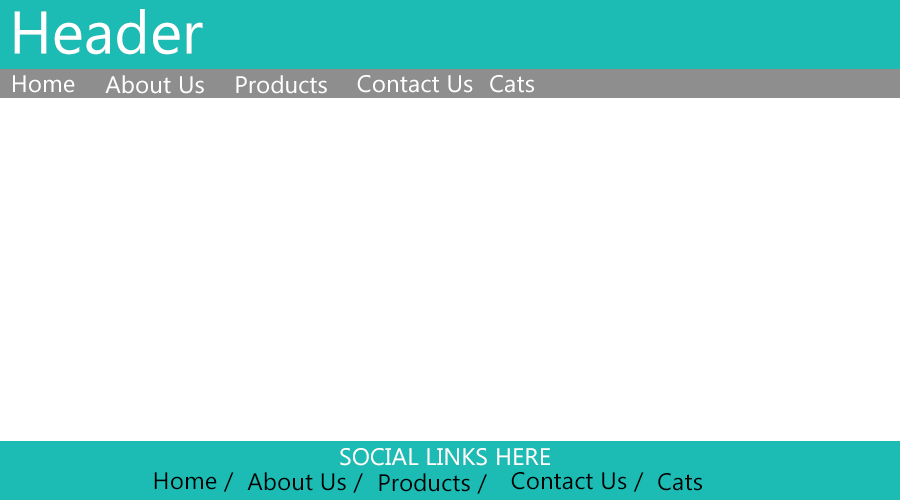
<style>
.page{position:relative;width:900px;height:500px;background:#ffffff}
.page>*{position:absolute;margin:0}
.t1{font:60px "SegoeUI";letter-spacing:0.005em;color:#ffffff}
.t2{font:24px "SegoeUI";letter-spacing:0.005em;color:#ffffff}
.t3{font:24px "SegoeUI";letter-spacing:0.005em;color:#000000}
</style>
<div class="page">
<p class="t1" style="left:14px;top:9px;width:189px;height:46px">Header</p>
<p class="t2" style="left:13px;top:75px;width:62px;height:18px">Home</p>
<p class="t2" style="left:105px;top:75px;width:99px;height:19px">About Us</p>
<p class="t2" style="left:236px;top:75px;width:91px;height:19px">Products</p>
<p class="t2" style="left:357px;top:75px;width:116px;height:18px">Contact Us</p>
<p class="t2" style="left:490px;top:75px;width:44px;height:18px">Cats</p>
<p class="t2" style="left:340px;top:448px;width:210px;height:18px">SOCIAL LINKS HERE</p>
<p class="t3" style="left:154px;top:472px;width:80px;height:20px">Home /</p>
<p class="t3" style="left:247px;top:472px;width:116px;height:21px">About Us /</p>
<p class="t3" style="left:379px;top:473px;width:108px;height:21px">Products /</p>
<p class="t3" style="left:511px;top:472px;width:133px;height:20px">Contact Us /</p>
<p class="t3" style="left:658px;top:473px;width:44px;height:18px">Cats</p>
</div>
